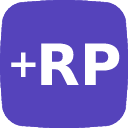
<style>
.page{position:relative;width:128px;height:128px;background:#5543bb}
.page>*{position:absolute;margin:0}
.t1{font:39px "DejaVuSans-Bold";color:#ffffff}
.t2{font:57px "DejaVuSans-Bold";color:#ffffff}
</style>
<div class="page">
<p class="t1" style="left:11px;top:52px;width:25px;height:25px">+</p>
<p class="t2" style="left:41px;top:43px;width:79px;height:42px">RP</p>
</div>
